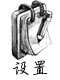
<style>
.page{position:relative;width:60px;height:80px;background:#ffffff}
.page>*{position:absolute;margin:0}
.t1{font:18px "STXingkaiSC-Light";letter-spacing:0.055em;color:#000000}
</style>
<div class="page">
<p class="t1" style="left:13px;top:60px;width:34px;height:16px">设置</p>
</div>
